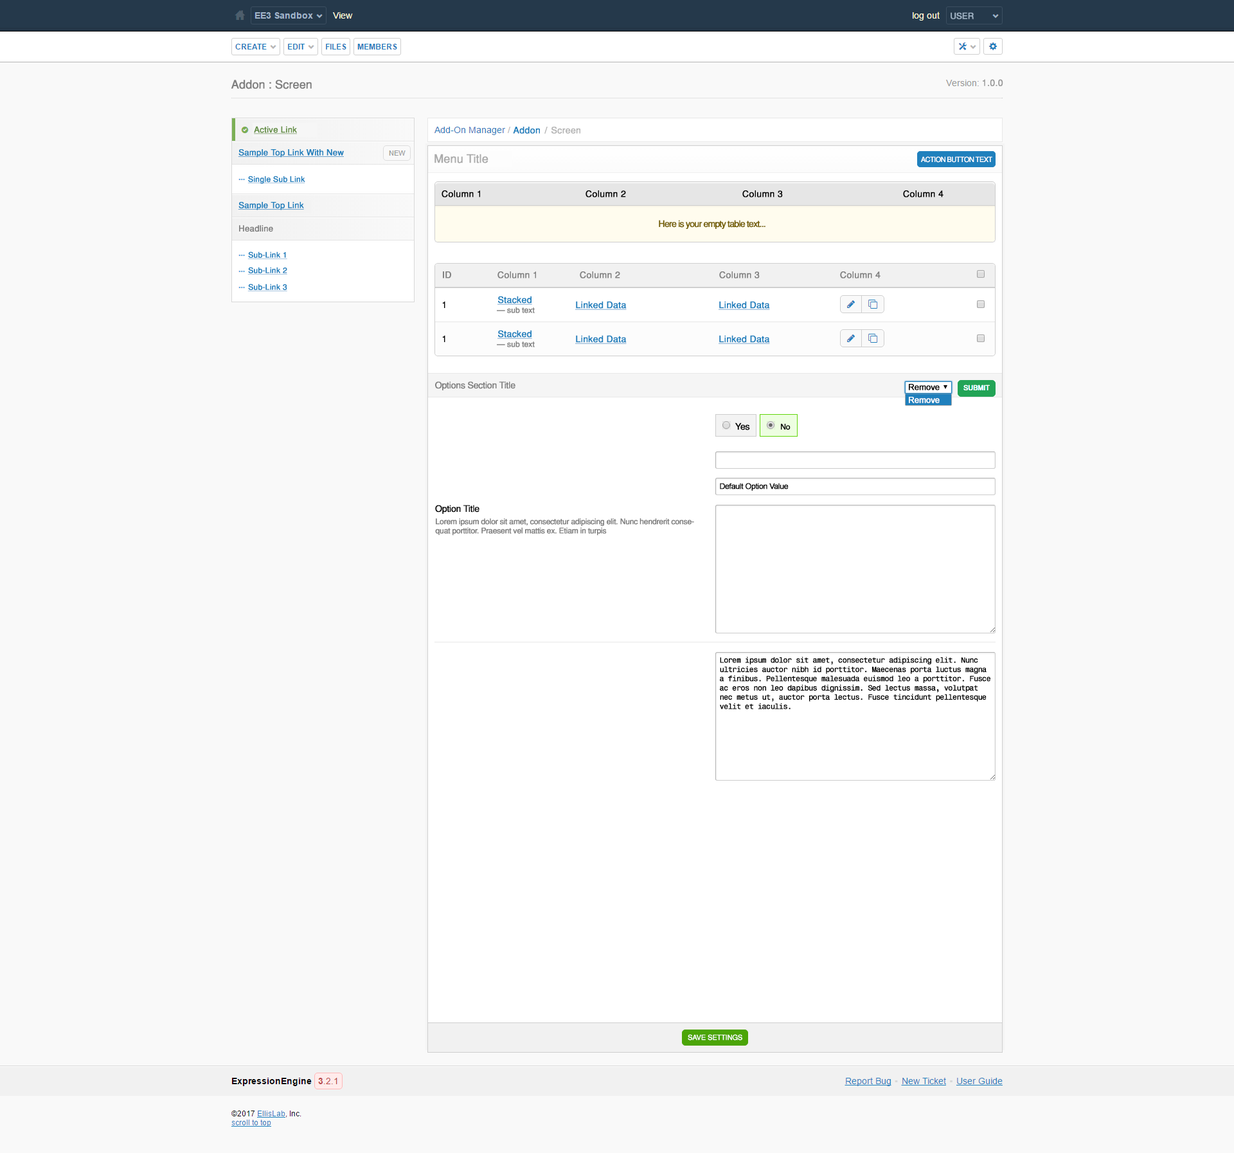
<style>
.page{position:relative;width:1234px;height:1153px;background:#f9f9f9}
.page>*{position:absolute;margin:0}
.t1{font:8.4px "Helvetica-Normal";letter-spacing:-0.02em;color:#a1b4c6;font-weight:bold}
.t2{font:11.6px "Helvetica-Normal";letter-spacing:-0.02em;color:#808080;font-weight:bold}
.t3{font:9px "Helvetica-Normal";color:#999999;font-weight:bold}
.t4{font:8.4px "Helvetica-Normal";color:#638e43;font-weight:bold;text-decoration:underline}
.t5{font:9px "Helvetica-Normal";color:#1f80bd;font-weight:bold}
.t6{font:9px "Helvetica-Normal";color:#b5b5b5;font-weight:bold}
.t7{font:8.4px "Helvetica-Normal";color:#1f80bd;font-weight:bold;text-decoration:underline}
.t8{font:11.6px "Helvetica-Normal";letter-spacing:-0.02em;color:#ababab;font-weight:bold}
.t9{font:7.1px "Helvetica-Normal";letter-spacing:-0.08em;color:#ffffff;font-weight:bold}
.t10{font:7.7px "Helvetica-Normal";color:#1f80bd;font-weight:bold;text-decoration:underline}
.t11{font:9px "Helvetica-Normal";color:#000000;font-weight:bold}
.t12{font:9px "Helvetica-Normal";letter-spacing:-0.08em;color:#745f00;font-weight:bold}
.t13{font:8.4px "Helvetica-Normal";color:#808080;font-weight:bold}
.t14{font:9px "Helvetica-Normal";color:#808080;font-weight:bold}
.t15{font:9px "Helvetica-Normal";letter-spacing:-0.08em;color:#000000;font-weight:bold}
.t16{font:9px "Helvetica-Normal";color:#1f80bd;font-weight:bold;text-decoration:underline}
.t17{font:7.7px "Helvetica-Normal";letter-spacing:-0.02em;color:#808080;font-weight:bold}
.t18{font:9px "Helvetica-Normal";letter-spacing:-0.04em;color:#808080;font-weight:bold}
.t19{font:8.6px "ArialMT";letter-spacing:-0.04em;color:#000000;font-weight:bold}
.t20{font:7.1px "ArialMT";letter-spacing:-0.04em;color:#ffffff;font-weight:bold}
.t21{font:8.6px "ArialMT";letter-spacing:-0.04em;color:#fefefe;font-weight:bold}
.t22{font:9px "Helvetica-Normal";letter-spacing:-0.04em;color:#000000;font-weight:bold}
.t23{font:7.7px "Helvetica-Normal";letter-spacing:-0.04em;color:#000000;font-weight:bold}
.t24{font:7.7px "ArialMT";letter-spacing:-0.04em;color:#000000;font-weight:bold}
.t25{font:7.7px "Helvetica-Normal";letter-spacing:-0.04em;color:#808080;font-weight:bold}
.t26{font:7.7px "Monospace821BT-Roman";letter-spacing:-0.08em;color:#000000;font-weight:bold}
.t27{font:7.1px "Helvetica-Normal";letter-spacing:-0.04em;color:#ffffff;font-weight:bold}
</style>
<div class="page">
<p class="t1" style="left:951px;top:12px;width:23px;height:7px">USER</p>
<p class="t2" style="left:231px;top:80px;width:81px;height:9px">Addon : Screen</p>
<p class="t3" style="left:983px;top:79px;width:21px;height:7px">1.0.0</p>
<p class="t4" style="left:254px;top:126px;width:43px;height:8px">Active Link</p>
<p class="t5" style="left:513px;top:127px;width:27px;height:7px">Addon</p>
<p class="t6" style="left:544px;top:127px;width:4px;height:7px">/</p>
<p class="t6" style="left:552px;top:127px;width:28px;height:7px">Screen</p>
<p class="t7" style="left:238px;top:149px;width:106px;height:9px">Sample Top Link With New</p>
<p class="t8" style="left:435px;top:154px;width:54px;height:9px">Menu Title</p>
<p class="t9" style="left:921px;top:156px;width:72px;height:7px">ACTION BUTTON TEXT</p>
<p class="t10" style="left:248px;top:176px;width:57px;height:8px">Single Sub Link</p>
<p class="t11" style="left:442px;top:190px;width:38px;height:7px">Column 1</p>
<p class="t11" style="left:586px;top:190px;width:40px;height:7px">Column 2</p>
<p class="t11" style="left:742px;top:190px;width:41px;height:7px">Column 3</p>
<p class="t11" style="left:903px;top:190px;width:41px;height:7px">Column 4</p>
<p class="t7" style="left:238px;top:202px;width:66px;height:8px">Sample Top Link</p>
<p class="t12" style="left:659px;top:220px;width:107px;height:9px">Here is your empty table text...</p>
<p class="t13" style="left:239px;top:225px;width:34px;height:7px">Headline</p>
<p class="t10" style="left:248px;top:251px;width:39px;height:8px">Sub-Link 1</p>
<p class="t10" style="left:248px;top:267px;width:39px;height:7px">Sub-Link 2</p>
<p class="t14" style="left:443px;top:271px;width:8px;height:7px">ID</p>
<p class="t14" style="left:498px;top:271px;width:38px;height:7px">Column 1</p>
<p class="t14" style="left:580px;top:271px;width:40px;height:7px">Column 2</p>
<p class="t14" style="left:719px;top:271px;width:41px;height:7px">Column 3</p>
<p class="t14" style="left:840px;top:271px;width:41px;height:7px">Column 4</p>
<p class="t10" style="left:248px;top:284px;width:39px;height:7px">Sub-Link 3</p>
<p class="t15" style="left:442px;top:301px;width:4px;height:7px">1</p>
<p class="t16" style="left:498px;top:296px;width:34px;height:9px">Stacked</p>
<p class="t16" style="left:575px;top:301px;width:52px;height:9px">Linked Data</p>
<p class="t16" style="left:719px;top:301px;width:51px;height:9px">Linked Data</p>
<p class="t17" style="left:497px;top:307px;width:38px;height:6px">— sub text</p>
<p class="t16" style="left:498px;top:330px;width:34px;height:9px">Stacked</p>
<p class="t15" style="left:442px;top:335px;width:4px;height:7px">1</p>
<p class="t17" style="left:497px;top:341px;width:38px;height:6px">— sub text</p>
<p class="t16" style="left:575px;top:335px;width:52px;height:9px">Linked Data</p>
<p class="t16" style="left:719px;top:335px;width:51px;height:9px">Linked Data</p>
<p class="t18" style="left:435px;top:381px;width:81px;height:9px">Options Section Title</p>
<p class="t19" style="left:909px;top:384px;width:31px;height:6px">Remove</p>
<p class="t19" style="left:909px;top:384px;width:31px;height:6px">Remove</p>
<p class="t20" style="left:964px;top:384px;width:26px;height:6px">SUBMIT</p>
<p class="t21" style="left:909px;top:397px;width:31px;height:6px">Remove</p>
<p class="t22" style="left:735px;top:422px;width:15px;height:8px">Yes</p>
<p class="t23" style="left:781px;top:424px;width:10px;height:6px">No</p>
<p class="t24" style="left:720px;top:483px;width:69px;height:8px">Default Option Value</p>
<p class="t22" style="left:435px;top:505px;width:45px;height:9px">Option Title</p>
<p class="t25" style="left:435px;top:518px;width:259px;height:18px">Lorem ipsum dolor sit amet, consectetur adipiscing elit. Nunc hendrerit consequat porttitor. Praesent vel mattis ex. Etiam in turpis</p>
<p class="t26" style="left:720px;top:656px;width:271px;height:53px">Lorem ipsum dolor sit amet, consectetur adipiscing elit. Nunc ultricies auctor nibh id porttitor. Maecenas porta luctus magna a finibus. Pellentesque malesuada euismod leo a porttitor. Fusce ac eros non leo dapibus dignissim. Sed lectus massa, volutpat nec metus ut, auctor porta lectus. Fusce tincidunt pellentesque velit et iaculis.</p>
<p class="t27" style="left:688px;top:1034px;width:54px;height:6px">SAVE SETTINGS</p>
</div>
